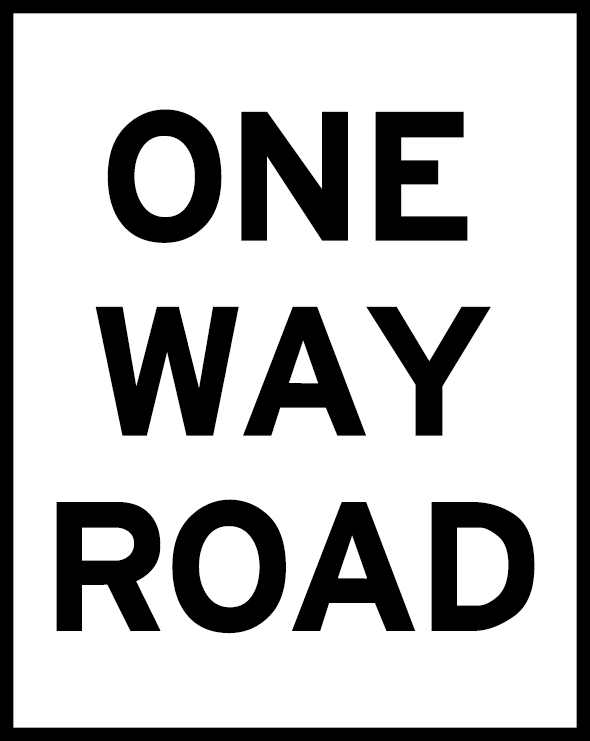
<style>
.page{position:relative;width:590px;height:741px;background:#ffffff}
.page>*{position:absolute;margin:0}
.t1{font:195.1px/195.1px "HittheRoad";color:#000000}
</style>
<div class="page">
<p class="t1" style="left:56px;top:109px;width:479px;height:525px;text-align:center">ONE<br>WAY<br>ROAD</p>
</div>
